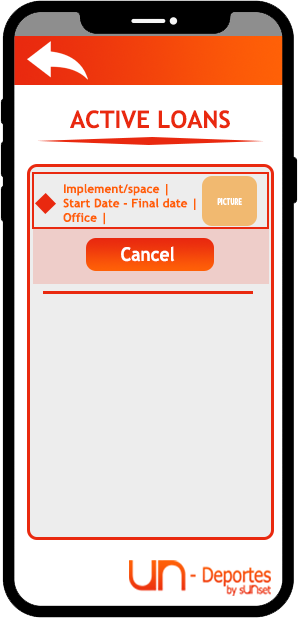
<style>
.page{position:relative;width:298px;height:618px;background:#ededed}
.page>*{position:absolute;margin:0}
.t1{font:24px "TrebuchetMS-Bold";color:#e9290f}
.t2{font:12px "TrebuchetMS-Bold";color:#ff6107}
.t3{font:9px "MyriadPro-Bold";color:#ffffff;scale:0.7 1}
.t4{font:19px "TrebuchetMS-Bold";color:#ffffff;scale:0.91 1}
</style>
<div class="page">
<p class="t1" style="left:70px;top:110px;width:160px;height:19px">ACTIVE LOANS</p>
<p class="t2" style="left:63px;top:183px;width:133px;height:42px">Implement/space | <br>Start Date - Final date |<br>Office |</p>
<p class="t3" style="left:217px;top:198px;width:25px;height:7px">PICTURE</p>
<p class="t4" style="left:121px;top:246px;width:54px;height:16px">Cancel</p>
</div>
